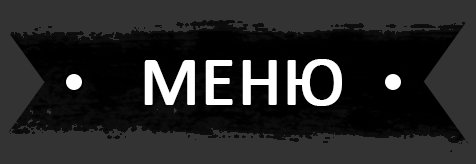
<style>
.page{position:relative;width:476px;height:164px;background:#333333}
.page>*{position:absolute;margin:0}
.t1{font:70px "Calibri";color:#ffffff;font-weight:bold}
</style>
<div class="page">
<p class="t1" style="left:144px;top:59px;width:198px;height:47px">МЕНЮ</p>
</div>
